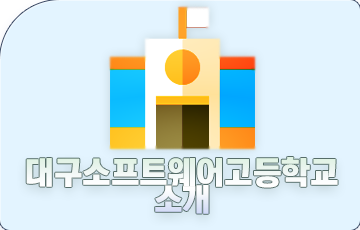
<style>
.page{position:relative;width:360px;height:230px;background:#e3f4ff}
.page>*{position:absolute;margin:0}
.t1{font:32px/27.3px "KoreanTITGD5-R";letter-spacing:-0.01em;color:#ffffff}
</style>
<div class="page">
<p class="t1" style="left:26px;top:157px;width:312px;height:57px;text-align:center">대구소프트웨어고등학교<br>소개</p>
<p class="t1" style="left:26px;top:157px;width:312px;height:57px;text-align:center">대구소프트웨어고등학교<br>소개</p>
</div>
